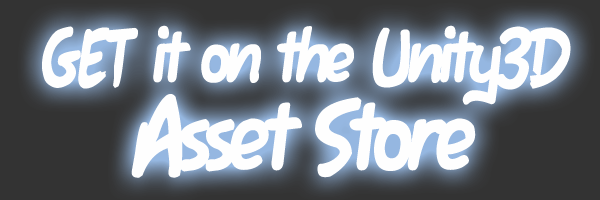
<style>
.page{position:relative;width:600px;height:200px;background:#333333}
.page>*{position:absolute;margin:0}
.t1{font:90px/90px "FawnScript";letter-spacing:-0.05em;color:#fefefe}
.t2{font:120px/90px "FawnScript";letter-spacing:-0.05em;color:#fefefe}
</style>
<div class="page">
<p class="t1" style="left:42px;top:25px;width:529px;height:153px;text-align:center">GET it on the Unity3D<br><span class="t2">Asset Store</span></p>
</div>
